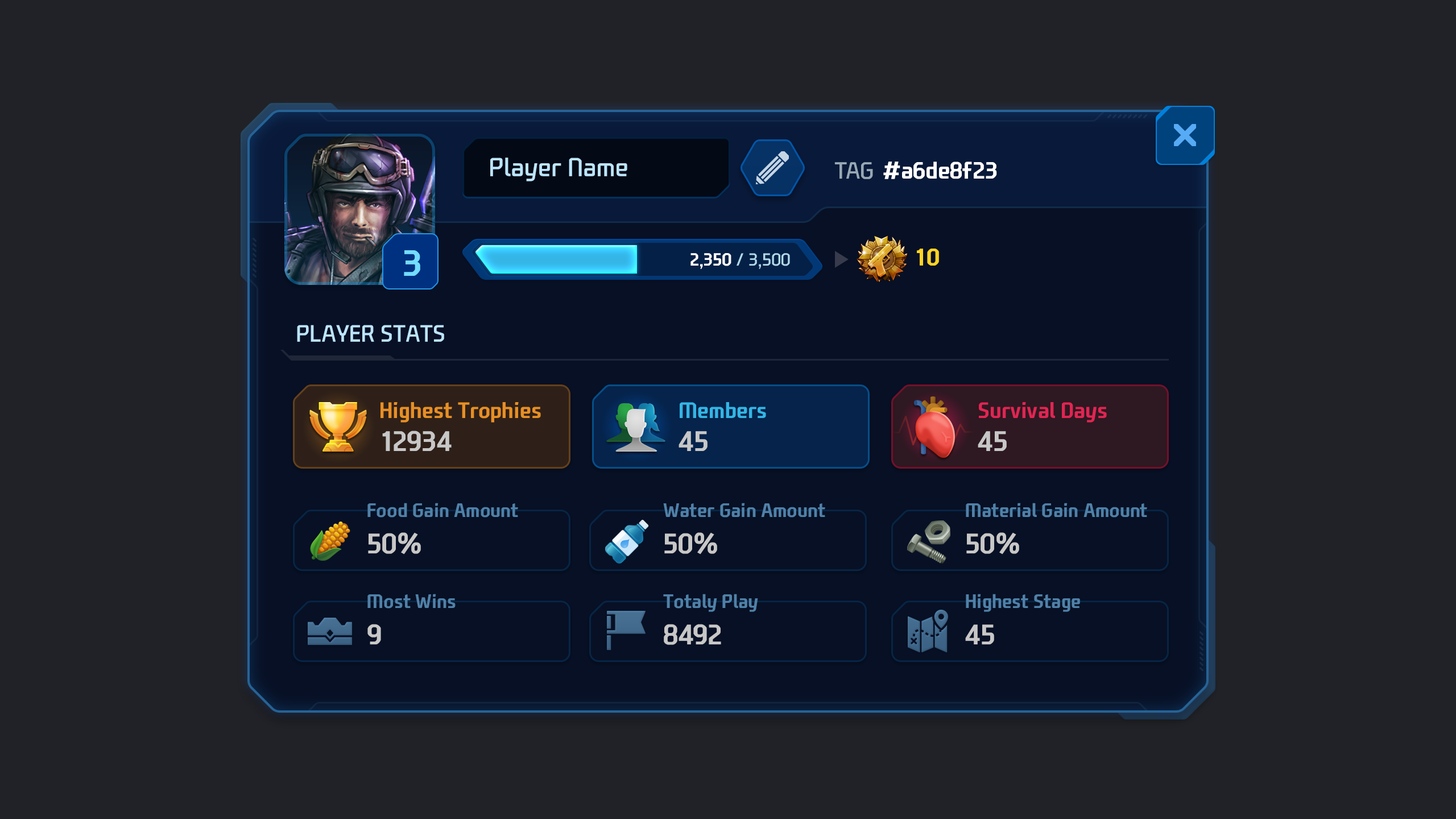
<style>
.page{position:relative;width:1456px;height:819px;background:#212227}
.page>*{position:absolute;margin:0}
.t1{font:25px "NEXONFootballGothicL";color:#bce5ff}
.t2{font:22.7px "NEXONFootballGothicB";color:#ffffff}
.t3{font:22.7px "NEXONFootballGothicL";color:#97a8b4;text-transform:uppercase}
.t4{font:35.1px "NEXONFootballGothicB";color:#73dcff}
.t5{font:17.1px "NEXONFootballGothicL";color:#afd9e9}
.t6{font:17.1px "NEXONFootballGothicB";color:#ffffff}
.t7{font:22.7px "NEXONFootballGothicB";color:#ffd323}
.t8{font:22.7px "NEXONFootballGothicL";color:#bce5ff;text-transform:uppercase}
.t9{font:21.6px "NEXONFootballGothicB";color:#e78f25}
.t10{font:21.6px "NEXONFootballGothicB";color:#34b5e5}
.t11{font:21.6px "NEXONFootballGothicB";color:#e12553}
.t12{font:27.3px "NEXONFootballGothicB";color:#c7c7c7}
.t13{font:18.8px "NEXONFootballGothicB";color:#5081a8}
</style>
<div class="page">
<p class="t1" style="left:490px;top:158px;width:137px;height:23px">Player Name</p>
<p class="t2" style="left:883px;top:162px;width:114px;height:17px">#a6de8f23</p>
<p class="t3" style="left:834px;top:162px;width:39px;height:17px">Tag</p>
<p class="t4" style="left:404px;top:250px;width:16px;height:26px">3</p>
<p class="t5" style="left:690px;top:253px;width:100px;height:16px"><span class="t6">2,350 </span>/ 3,500</p>
<p class="t7" style="left:917px;top:249px;width:22px;height:17px">10</p>
<p class="t8" style="left:297px;top:325px;width:147px;height:17px">Player Stats</p>
<p class="t9" style="left:380px;top:402px;width:161px;height:21px">Highest Trophies</p>
<p class="t10" style="left:680px;top:402px;width:86px;height:16px">Members</p>
<p class="t11" style="left:979px;top:402px;width:128px;height:21px">Survival Days</p>
<p class="t12" style="left:382px;top:431px;width:70px;height:20px">12934</p>
<p class="t12" style="left:679px;top:431px;width:29px;height:20px">45</p>
<p class="t12" style="left:978px;top:431px;width:29px;height:20px">45</p>
<p class="t13" style="left:367px;top:503px;width:151px;height:15px">Food Gain Amount</p>
<p class="t13" style="left:663px;top:503px;width:162px;height:15px">Water Gain Amount</p>
<p class="t13" style="left:966px;top:503px;width:181px;height:15px">Material Gain Amount</p>
<p class="t12" style="left:368px;top:532px;width:53px;height:23px">50%</p>
<p class="t12" style="left:664px;top:532px;width:53px;height:23px">50%</p>
<p class="t12" style="left:966px;top:532px;width:53px;height:23px">50%</p>
<p class="t13" style="left:367px;top:594px;width:89px;height:15px">Most Wins</p>
<p class="t13" style="left:663px;top:594px;width:95px;height:18px">Totaly Play</p>
<p class="t13" style="left:966px;top:594px;width:114px;height:18px">Highest Stage</p>
<p class="t12" style="left:367px;top:624px;width:14px;height:20px">9</p>
<p class="t12" style="left:664px;top:624px;width:57px;height:21px">8492</p>
<p class="t12" style="left:965px;top:624px;width:29px;height:20px">45</p>
</div>
